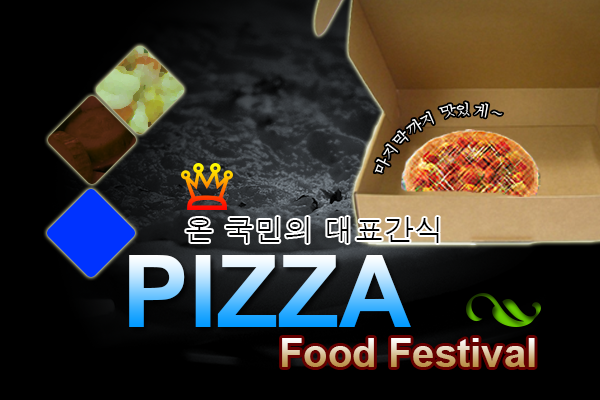
<style>
.page{position:relative;width:600px;height:400px;background:#000000}
.page>*{position:absolute;margin:0}
.t1{font:14px "Batang";color:#fefefe}
.t2{font:29.7px "Dotum";color:#000000}
.t3{font:99.8px "Arial-BoldMT"}
.t4{font:39.7px "Arial-BoldMT"}
</style>
<div class="page">
<p class="t1" style="left:374px;top:102px;width:129px;height:71px;rotate:-25deg">마지막까지 맛있게~</p>
<p class="t2" style="left:186px;top:217px;width:253px;height:26px">온 국민의 대표간식</p>
<p class="t3" style="left:129px;top:255px;width:282px;height:72px">PIZZA</p>
<p class="t4" style="left:282px;top:338px;width:253px;height:29px">Food Festival</p>
</div>
